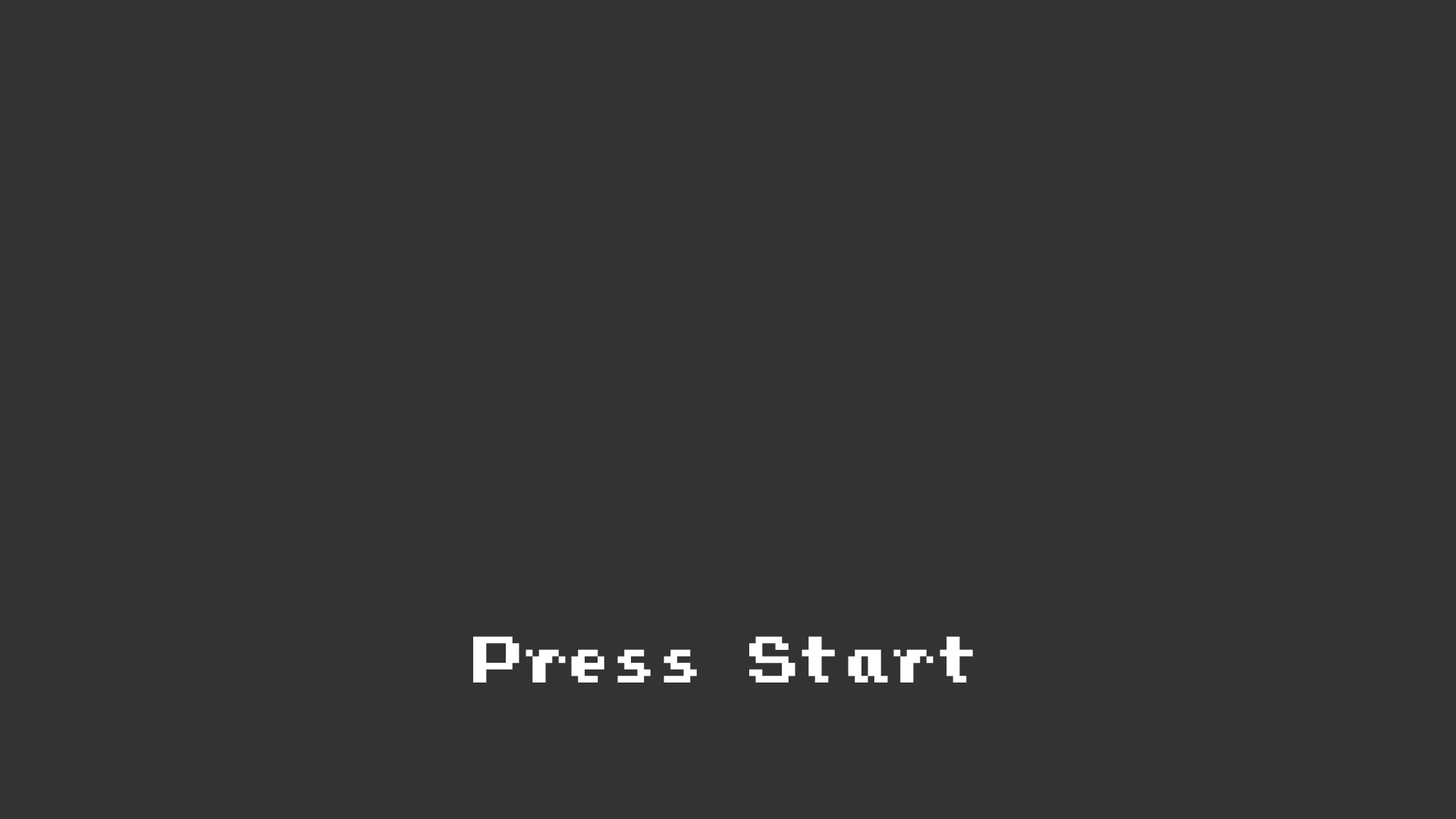
<style>
.page{position:relative;width:1456px;height:819px;background:#333333}
.page>*{position:absolute;margin:0}
.t1{font:52.3px "PressStartReg";letter-spacing:-0.12em;color:#ffffff}
</style>
<div class="page">
<p class="t1" style="left:473px;top:636px;width:500px;height:46px">Press Start</p>
</div>
